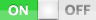
<style>
.page{position:relative;width:96px;height:20px}
.page>*{position:absolute;margin:0}
.t1{font:13px "LucidaGrande-Bold";color:#ffffff}
.t2{font:13px "LucidaGrande-Bold";color:#808080}
</style>
<div class="page">
<p class="t1" style="left:8px;top:5px;width:20px;height:11px">ON</p>
<p class="t2" style="left:65px;top:5px;width:26px;height:10px">OFF</p>
</div>
